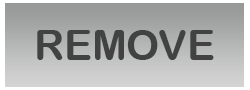
<style>
.page{position:relative;width:250px;height:90px}
.page>*{position:absolute;margin:0}
.t1{font:41.7px "ArialRoundedMTBold";color:#424242}
</style>
<div class="page">
<p class="t1" style="left:37px;top:30px;width:177px;height:30px">REMOVE</p>
</div>
